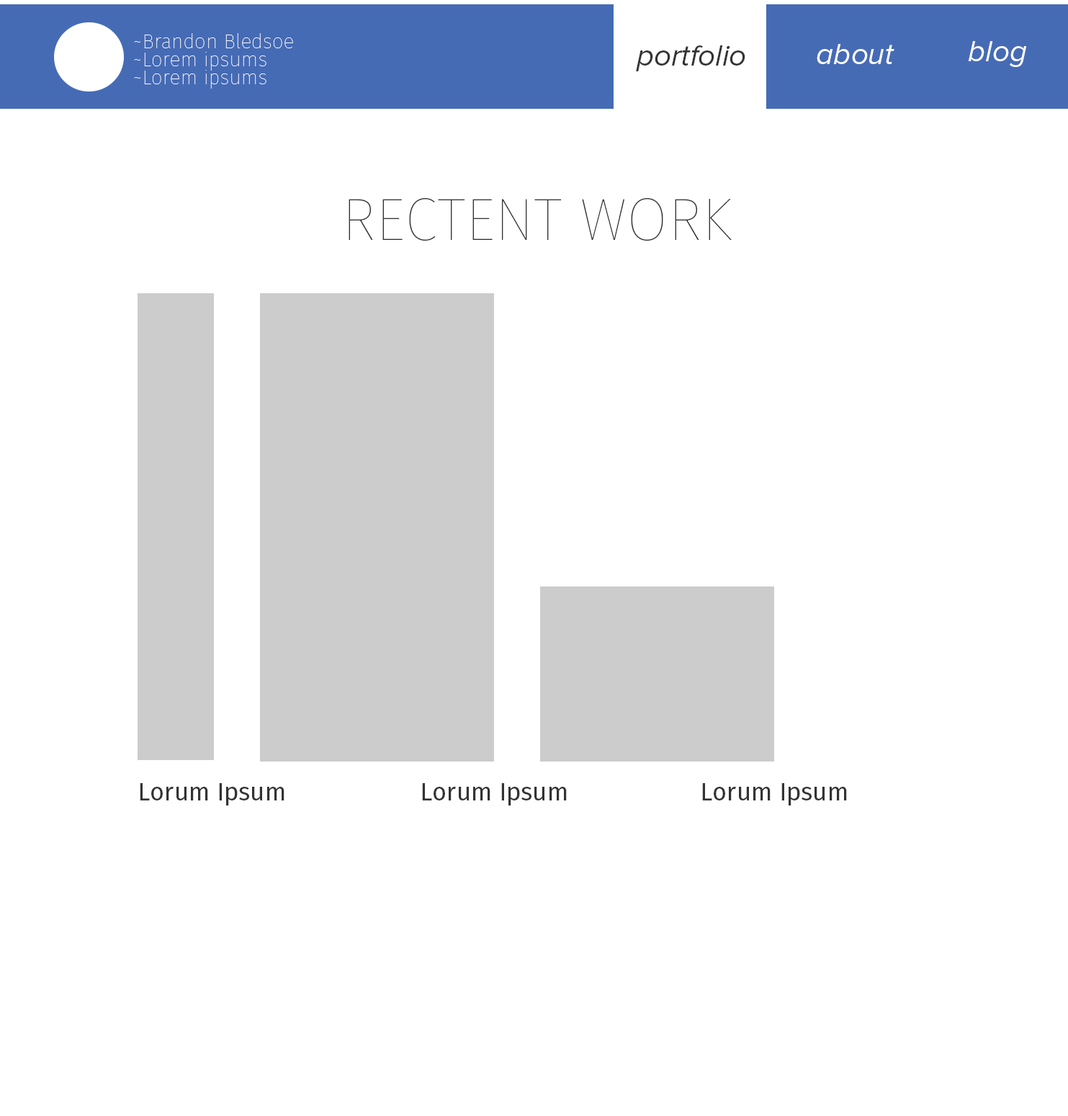
<style>
.page{position:relative;width:1068px;height:1116px;background:#ffffff}
.page>*{position:absolute;margin:0}
.t1{font:20.2px "FiraSans-Hair";color:#ffffff}
.t2{font:30.1px "ProximaNova-RegularIt";color:#ffffff}
.t3{font:30.1px "ProximaNova-RegularIt";color:#333333}
.t4{font:59.7px "FiraSans-Hair";color:#31312f}
.t5{font:24.9px "FiraSans-Regular";color:#333333}
</style>
<div class="page">
<p class="t1" style="left:134px;top:33px;width:159px;height:15px">~Brandon Bledsoe</p>
<p class="t2" style="left:968px;top:41px;width:59px;height:26px">blog</p>
<p class="t1" style="left:134px;top:52px;width:133px;height:19px">~Lorem ipsums</p>
<p class="t3" style="left:636px;top:45px;width:110px;height:26px">portfolio</p>
<p class="t2" style="left:817px;top:44px;width:78px;height:20px">about</p>
<p class="t1" style="left:134px;top:70px;width:133px;height:19px">~Lorem ipsums</p>
<p class="t4" style="left:349px;top:198px;width:383px;height:43px">RECTENT WORK</p>
<p class="t5" style="left:140px;top:783px;width:145px;height:22px">Lorum Ipsum</p>
<p class="t5" style="left:422px;top:783px;width:145px;height:22px">Lorum Ipsum</p>
<p class="t5" style="left:702px;top:783px;width:145px;height:22px">Lorum Ipsum</p>
</div>
